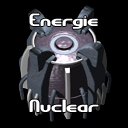
<style>
.page{position:relative;width:128px;height:128px;background:#000000}
.page>*{position:absolute;margin:0}
.t1{font:18px "GravitateBRK";color:#ffffff}
</style>
<div class="page">
<p class="t1" style="left:29px;top:13px;width:69px;height:16px">Energie</p>
<p class="t1" style="left:29px;top:99px;width:70px;height:13px">Nuclear</p>
</div>
